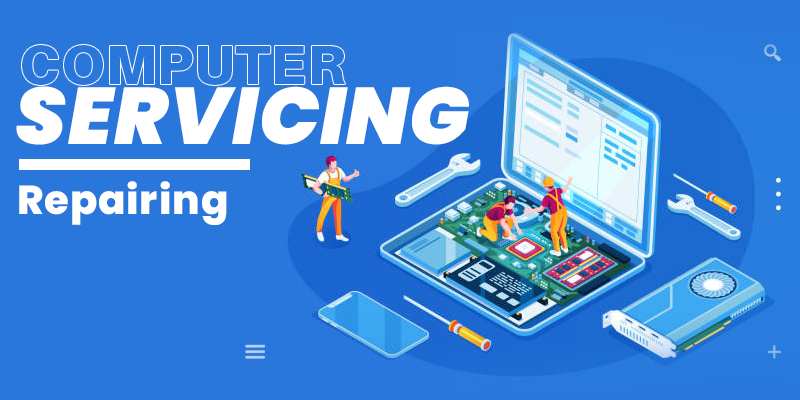
<style>
.page{position:relative;width:800px;height:400px;background:#2977db}
.page>*{position:absolute;margin:0}
.t1{font:55.3px "Aileron-Black";letter-spacing:0.02em;color:#ffffff;text-transform:uppercase}
.t2{font:80px "Poppins-BlackItalic";letter-spacing:0.02em;color:#ffffff;text-transform:uppercase}
.t3{font:40.3px "Poppins-ExtraBold";letter-spacing:0.02em;color:#ffffff}
</style>
<div class="page">
<p class="t1" style="left:22px;top:45px;width:323px;height:40px">Computer</p>
<p class="t2" style="left:16px;top:86px;width:453px;height:59px">Servicing</p>
<p class="t3" style="left:19px;top:181px;width:208px;height:44px">Repairing</p>
</div>
